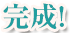
<style>
.page{position:relative;width:71px;height:33px;background:#fff6f2}
.page>*{position:absolute;margin:0}
.t1{font:28px "RyuminPr6N-ExBold";color:#239e9f}
</style>
<div class="page">
<p class="t1" style="left:3px;top:3px;width:61px;height:27px">完成!</p>
</div>
